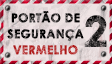
<style>
.page{position:relative;width:112px;height:64px}
.page>*{position:absolute;margin:0}
.t1{font:12px/16px "CenturyGothic-Bold";letter-spacing:0.005em;text-transform:uppercase;font-weight:bold}
.t2{font:41.3px "CenturyGothic-Bold";letter-spacing:0.005em;text-transform:uppercase;font-weight:bold}
</style>
<div class="page">
<p class="t1" style="left:7px;top:11px;width:77px;height:44px;text-align:center">PORTÃO DE<br>SEGURANÇA<br>VERMELHO</p>
<p class="t2" style="left:84px;top:15px;width:23px;height:32px">2</p>
</div>
